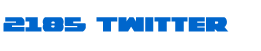
<style>
.page{position:relative;width:261px;height:51px;background:#ffffff}
.page>*{position:absolute;margin:0}
.t1{font:23.2px "Guardian";color:#0066cc;scale:1.1 1}
</style>
<div class="page">
<p class="t1" style="left:3px;top:17px;width:226px;height:15px">2185 Twitter</p>
</div>
